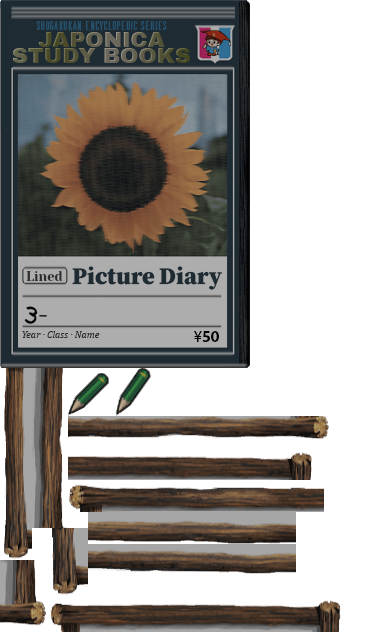
<style>
.page{position:relative;width:384px;height:640px;background:#ffffff}
.page>*{position:absolute;margin:0}
.t1{font:13px "GrandAventureText";color:#25516c}
.t2{font:22px/16px "ArchivoBlack-Regular"}
.t3{font:24px "SourceSerifRoman-Black";color:#1e2b33}
.t4{font:13px "YesevaOne-Regular";color:#2c2c2c}
.t5{font:10px "Cambria-Italic";color:#2c2c2c}
.t6{font:16px "MyriadPro-Bold";color:#000000}
.t7{font:16px "MyriadPro-Regular";color:#000000}
</style>
<div class="page">
<p class="t1" style="left:36px;top:21px;width:131px;height:10px">Shogakukan Encyclopedic Series</p>
<p class="t2" style="left:13px;top:32px;width:178px;height:31px;text-align:center">JAPONICA <br>STUDY BOOKS</p>
<p class="t3" style="left:72px;top:266px;width:150px;height:24px">Picture Diary</p>
<p class="t4" style="left:26px;top:271px;width:37px;height:10px">Lined</p>
<p class="t5" style="left:22px;top:331px;width:78px;height:7px">Year · Class · Name</p>
<p class="t6" style="left:194px;top:331px;width:25px;height:11px"><span class="t7">¥</span>50</p>
</div>
